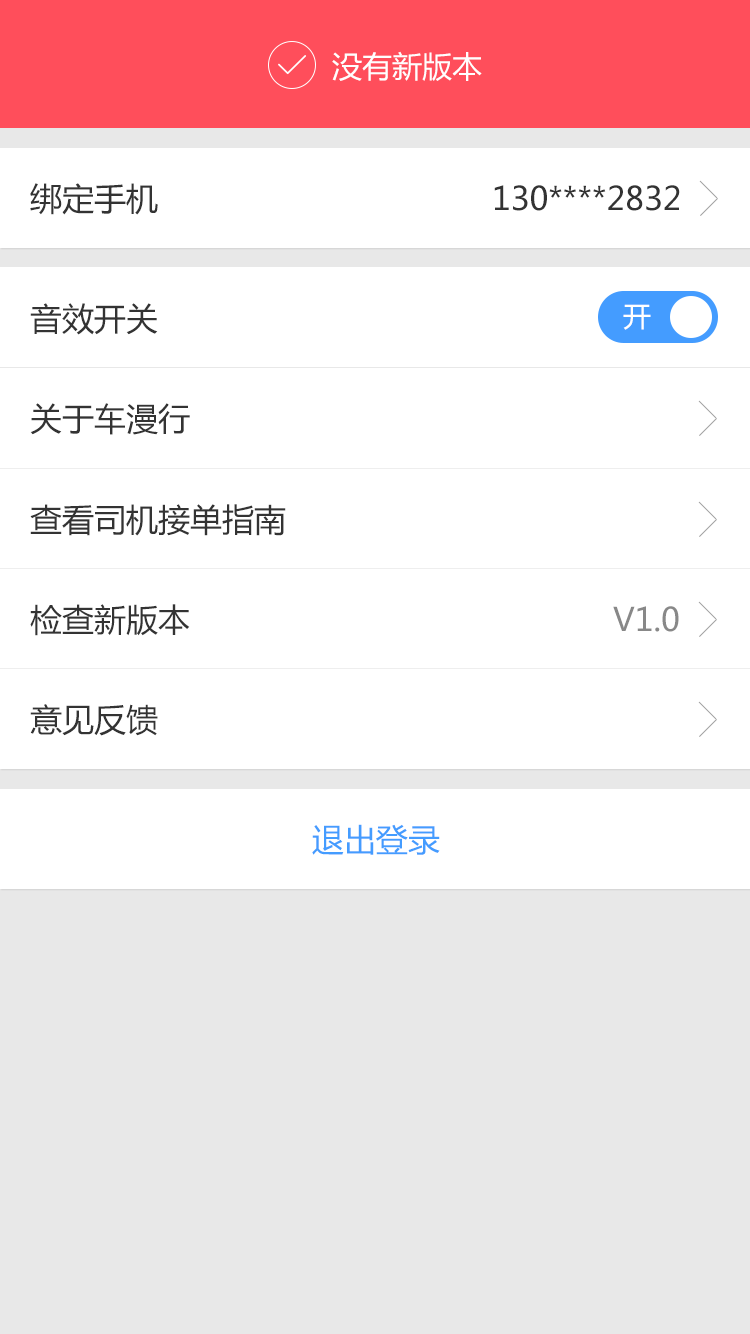
<style>
.page{position:relative;width:750px;height:1334px;background:#ffffff}
.page>*{position:absolute;margin:0}
.t1{font:30px "MicrosoftYaHei";color:#fffefe}
.t2{font:32px "MicrosoftYaHei";color:#333333}
.t3{font:28px "MicrosoftYaHei";color:#ffffff}
.t4{font:32px "MicrosoftYaHei";color:#888888}
.t5{font:32px "MicrosoftYaHei";color:#449cff}
</style>
<div class="page">
<p class="t1" style="left:332px;top:51px;width:150px;height:30px">没有新版本</p>
<p class="t2" style="left:30px;top:183px;width:128px;height:32px">绑定手机</p>
<p class="t2" style="left:494px;top:185px;width:186px;height:26px">130****2832</p>
<p class="t2" style="left:30px;top:303px;width:128px;height:32px">音效开关</p>
<p class="t3" style="left:623px;top:304px;width:28px;height:26px">开</p>
<p class="t2" style="left:30px;top:403px;width:160px;height:32px">关于车漫行</p>
<p class="t2" style="left:30px;top:504px;width:256px;height:32px">查看司机接单指南</p>
<p class="t2" style="left:30px;top:604px;width:160px;height:32px">检查新版本</p>
<p class="t4" style="left:613px;top:606px;width:66px;height:26px">V1.0</p>
<p class="t2" style="left:30px;top:704px;width:128px;height:32px">意见反馈</p>
<p class="t5" style="left:312px;top:824px;width:128px;height:31px">退出登录</p>
</div>
